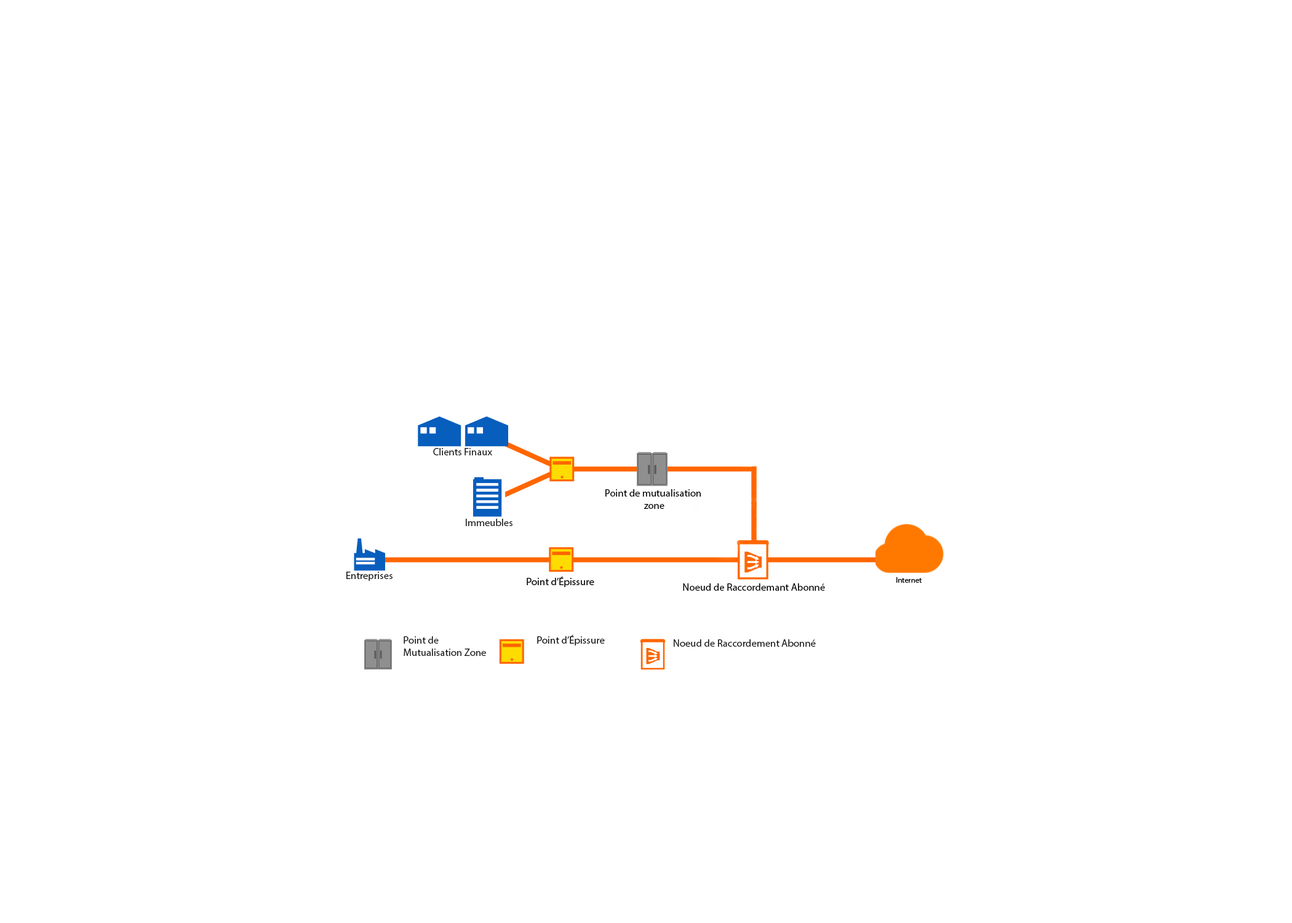
<style>
.page{position:relative;width:1292px;height:923px;background:#ffffff}
.page>*{position:absolute;margin:0}
.t1{font:10.3px "MyriadPro-Regular";color:#1c1c1c}
.t2{font:10.3px "MyriadPro-Regular";color:#000000}
.t3{font:10.3px "MyriadPro-Regular";color:#1a1919}
.t4{font:10.3px "MyriadPro-Regular";color:#151414}
</style>
<div class="page">
<p class="t1" style="left:433px;top:448px;width:59px;height:7px">Clients Finaux</p>
<p class="t2" style="left:605px;top:489px;width:96px;height:20px;text-align:center">Point de mutualisation<br> zone</p>
<p class="t1" style="left:466px;top:519px;width:47px;height:7px">Immeubles</p>
<p class="t3" style="left:346px;top:572px;width:47px;height:9px">Entreprises</p>
<p class="t2" style="left:683px;top:583px;width:142px;height:8px">Noeud de Raccordemant Abonné</p>
<p class="t1" style="left:404px;top:636px;width:82px;height:20px">Point de Mutualisation Zone</p>
<p class="t4" style="left:537px;top:635px;width:68px;height:10px">Point d’Épissure Optique</p>
<p class="t3" style="left:674px;top:639px;width:142px;height:8px">Noeud de Raccordement Abonné</p>
</div>
